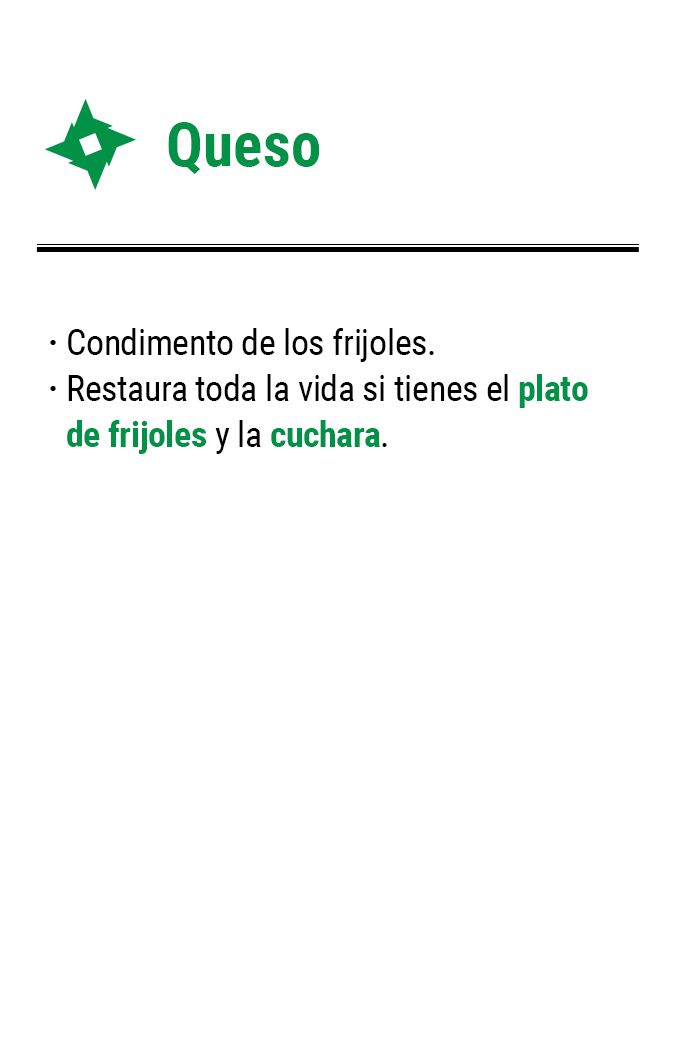
<style>
.page{position:relative;width:675px;height:1050px;background:#ffffff}
.page>*{position:absolute;margin:0}
.t1{font:61.2px "RobotoCondensed-Bold";color:#019147}
.t2{font:35.8px/45.8px "RobotoCondensed-Regular";letter-spacing:-0.01em;color:#000000}
.t3{font:35.8px/45.8px "RobotoCondensed-Bold";letter-spacing:-0.01em;color:#019147}
.t4{font:35.8px/45.8px "RobotoCondensed-Bold";letter-spacing:-0.01em;color:#000000}
</style>
<div class="page">
<p class="t1" style="left:168px;top:122px;width:152px;height:52px">Queso</p>
<p class="t2" style="left:67px;top:328px;width:521px;height:126px">Condimento de los frijoles.<br>Restaura toda la vida si tienes el <span class="t3">plato de frijoles</span> y la <span class="t3">cuchara</span>.</p>
<p class="t4" style="left:50px;top:340px;width:6px;height:51px">·<br>·</p>
</div>
